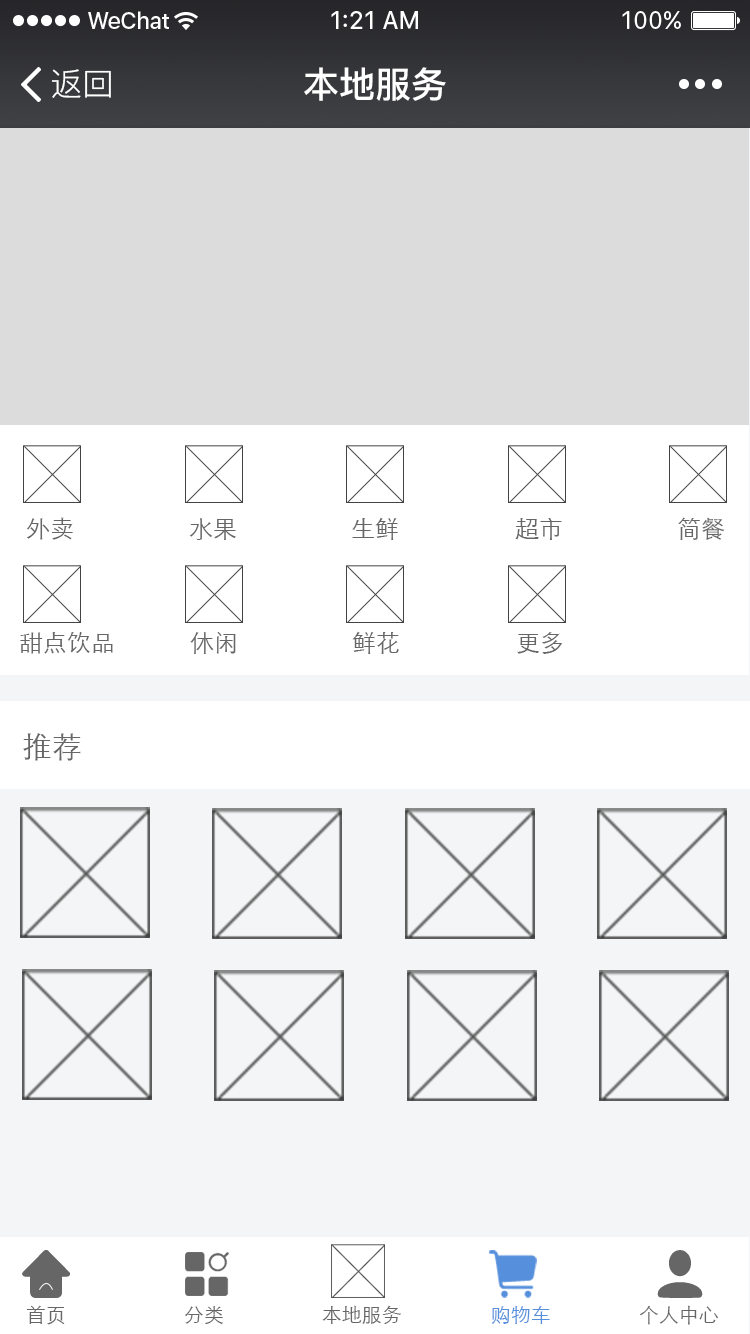
<style>
.page{position:relative;width:750px;height:1334px;background:#f4f5f6}
.page>*{position:absolute;margin:0}
.t1{font:32px "PingFang-SC-Regular";color:#ffffff}
.t2{font:36px "PingFang-SC-Bold";color:#ffffff}
.t3{font:24px "STXihei";color:#666666}
.t4{font:30px "STXihei";color:#666666}
.t5{font:20px "STXihei";color:#666666}
.t6{font:20px "STXihei";color:#568fdc}
</style>
<div class="page">
<p class="t1" style="left:52px;top:69px;width:59px;height:29px">返回</p>
<p class="t2" style="left:304px;top:67px;width:142px;height:34px">本地服务</p>
<p class="t3" style="left:26px;top:517px;width:47px;height:23px">外卖</p>
<p class="t3" style="left:189px;top:518px;width:47px;height:22px">水果</p>
<p class="t3" style="left:352px;top:517px;width:46px;height:23px">生鲜</p>
<p class="t3" style="left:515px;top:518px;width:47px;height:22px">超市</p>
<p class="t3" style="left:678px;top:517px;width:46px;height:23px">简餐</p>
<p class="t3" style="left:20px;top:632px;width:93px;height:22px">甜点饮品</p>
<p class="t3" style="left:190px;top:632px;width:46px;height:22px">休闲</p>
<p class="t3" style="left:352px;top:631px;width:47px;height:23px">鲜花</p>
<p class="t3" style="left:517px;top:632px;width:45px;height:22px">更多</p>
<p class="t4" style="left:23px;top:733px;width:58px;height:28px">推荐</p>
<p class="t5" style="left:26px;top:1305px;width:39px;height:20px">首页</p>
<p class="t5" style="left:185px;top:1306px;width:38px;height:19px">分类</p>
<p class="t5" style="left:322px;top:1305px;width:79px;height:19px">本地服务</p>
<p class="t6" style="left:491px;top:1305px;width:59px;height:19px">购物车</p>
<p class="t5" style="left:639px;top:1305px;width:79px;height:20px">个人中心</p>
</div>
